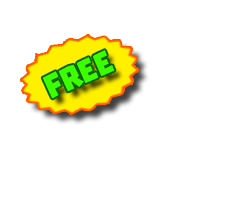
<style>
.page{position:relative;width:244px;height:202px;background:#ffffff}
.page>*{position:absolute;margin:0}
.t1{font:36px "Millennia1";color:#3cff00}
</style>
<div class="page">
<p class="t1" style="left:42px;top:50px;width:73px;height:49px;rotate:-24deg">Free</p>
</div>
